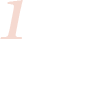
<style>
.page{position:relative;width:100px;height:100px;background:#ffffff}
.page>*{position:absolute;margin:0}
.t1{font:72px "LucidaCalligraphy-Italic";color:#f5d9d0}
</style>
<div class="page">
<p class="t1" style="left:0px;top:0px;width:23px;height:39px">1</p>
</div>
